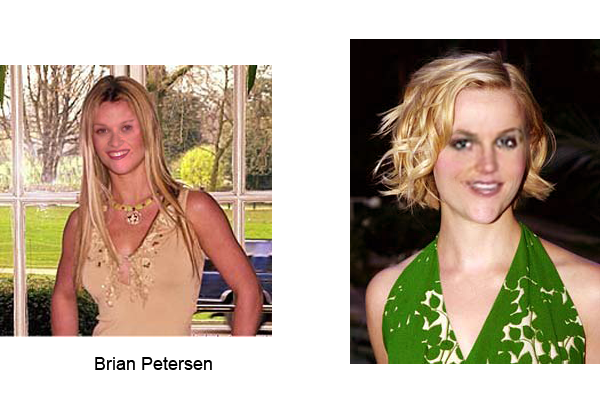
<style>
.page{position:relative;width:600px;height:400px;background:#ffffff}
.page>*{position:absolute;margin:0}
.t1{font:18px "ArialMT";color:#000000}
</style>
<div class="page">
<p class="t1" style="left:95px;top:357px;width:117px;height:13px">Brian Petersen</p>
</div>
